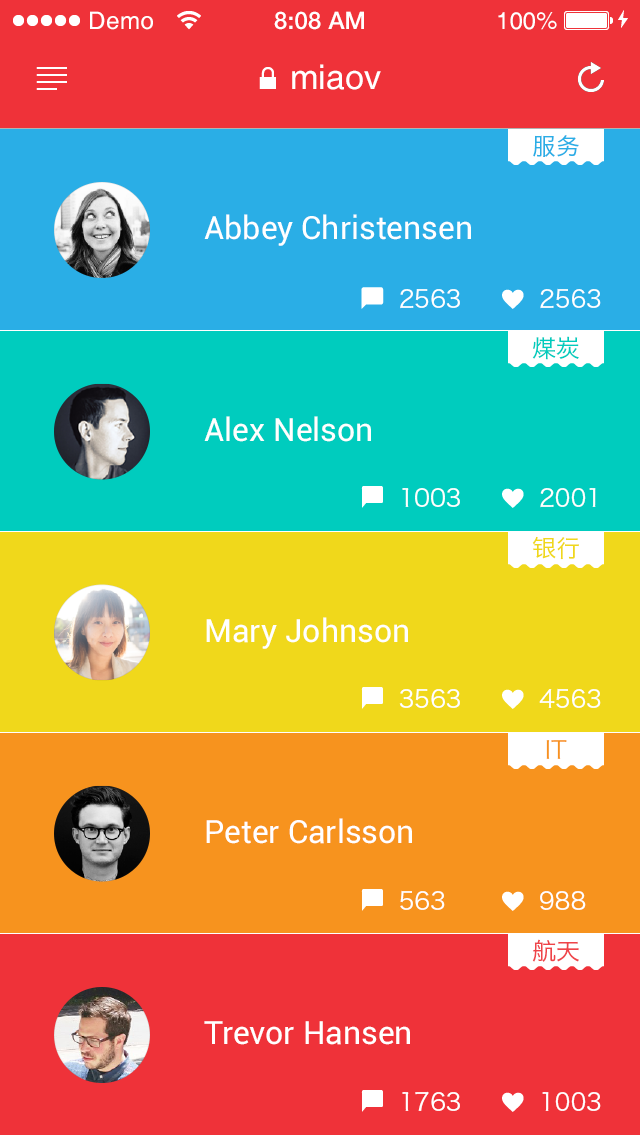
<style>
.page{position:relative;width:640px;height:1136px;background:#ef3239}
.page>*{position:absolute;margin:0}
.t1{font:24px "Helvetica";letter-spacing:0.028em;color:#ffffff}
.t2{font:24px "HelveticaNeueLTPro-Md";letter-spacing:0.006em;color:#ffffff}
.t3{font:24px "Helvetica";color:#ffffff}
.t4{font:34px "Helvetica";letter-spacing:0.005em;color:#ffffff}
.t5{font:24px "HiraginoSansGB-W3";color:#2aaee6}
.t6{font:32px "Roboto-Regular";color:#ffffff}
.t7{font:24px "HiraginoSansGB-W3";color:#ffffff}
.t8{font:24px "HiraginoSansGB-W3";color:#00ccbe}
.t9{font:24px "HiraginoSansGB-W3";color:#f0d81b}
.t10{font:24px "HiraginoSansGB-W3";color:#f7931e}
.t11{font:24px "HiraginoSansGB-W3";color:#ef4449}
</style>
<div class="page">
<p class="t1" style="left:90px;top:11px;width:63px;height:19px">Demo</p>
<p class="t2" style="left:274px;top:11px;width:90px;height:19px">8:08 AM</p>
<p class="t3" style="left:498px;top:12px;width:59px;height:18px">100%</p>
<p class="t4" style="left:292px;top:64px;width:89px;height:26px">miaov</p>
<p class="t5" style="left:533px;top:135px;width:46px;height:22px">服务</p>
<p class="t6" style="left:204px;top:214px;width:267px;height:32px">Abbey Christensen</p>
<p class="t7" style="left:400px;top:289px;width:60px;height:20px">2563</p>
<p class="t7" style="left:540px;top:288px;width:61px;height:21px">2563</p>
<p class="t8" style="left:532px;top:336px;width:47px;height:24px">煤炭</p>
<p class="t6" style="left:204px;top:416px;width:167px;height:26px">Alex Nelson</p>
<p class="t7" style="left:402px;top:488px;width:58px;height:19px">1003</p>
<p class="t7" style="left:540px;top:488px;width:56px;height:20px">2001</p>
<p class="t9" style="left:532px;top:536px;width:47px;height:24px">银行</p>
<p class="t6" style="left:206px;top:617px;width:202px;height:32px">Mary Johnson</p>
<p class="t7" style="left:399px;top:689px;width:61px;height:19px">3563</p>
<p class="t7" style="left:539px;top:688px;width:62px;height:20px">4563</p>
<p class="t10" style="left:546px;top:740px;width:21px;height:19px">IT</p>
<p class="t6" style="left:206px;top:818px;width:206px;height:26px">Peter Carlsson</p>
<p class="t7" style="left:400px;top:890px;width:45px;height:20px">563</p>
<p class="t7" style="left:540px;top:891px;width:46px;height:19px">988</p>
<p class="t11" style="left:532px;top:939px;width:47px;height:23px">航天</p>
<p class="t6" style="left:204px;top:1021px;width:206px;height:24px">Trevor Hansen</p>
<p class="t7" style="left:402px;top:1091px;width:58px;height:20px">1763</p>
<p class="t7" style="left:542px;top:1092px;width:59px;height:19px">1003</p>
</div>
